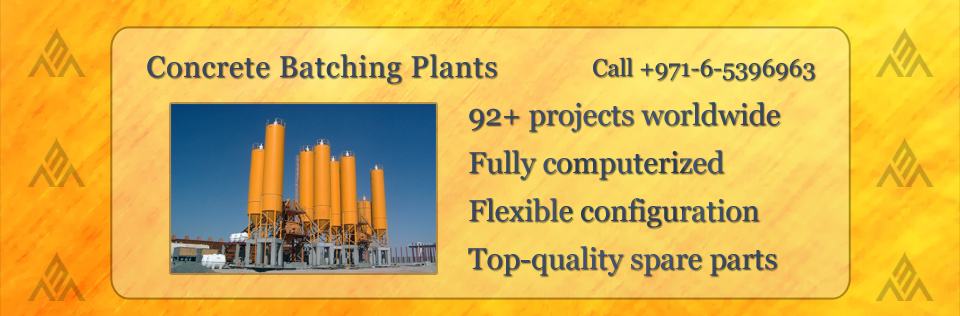
<style>
.page{position:relative;width:960px;height:316px}
.page>*{position:absolute;margin:0}
.t1{font:30px "Georgia";letter-spacing:0.025em;color:#364866}
.t2{font:24px "Georgia";color:#364866}
.t3{font:30px/48px "Georgia";color:#374a6a}
</style>
<div class="page">
<p class="t1" style="left:147px;top:54px;width:350px;height:30px">Concrete Batching Plants</p>
<p class="t2" style="left:593px;top:57px;width:222px;height:24px">Call +971-6-5396963</p>
<p class="t3" style="left:468px;top:102px;width:312px;height:174px">92+ projects worldwide<br>Fully computerized<br>Flexible configuration<br>Top-quality spare parts</p>
</div>
